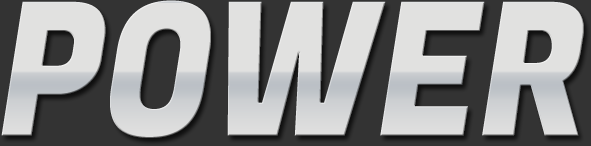
<style>
.page{position:relative;width:591px;height:146px;background:#e1e1e0}
.page>*{position:absolute;margin:0}
.t1{font:185.2px "FugazOne-Regular";color:#dfdfdf;scale:0.89 1}
</style>
<div class="page">
<p class="t1" style="left:1px;top:0px;width:583px;height:138px">POWER</p>
</div>
